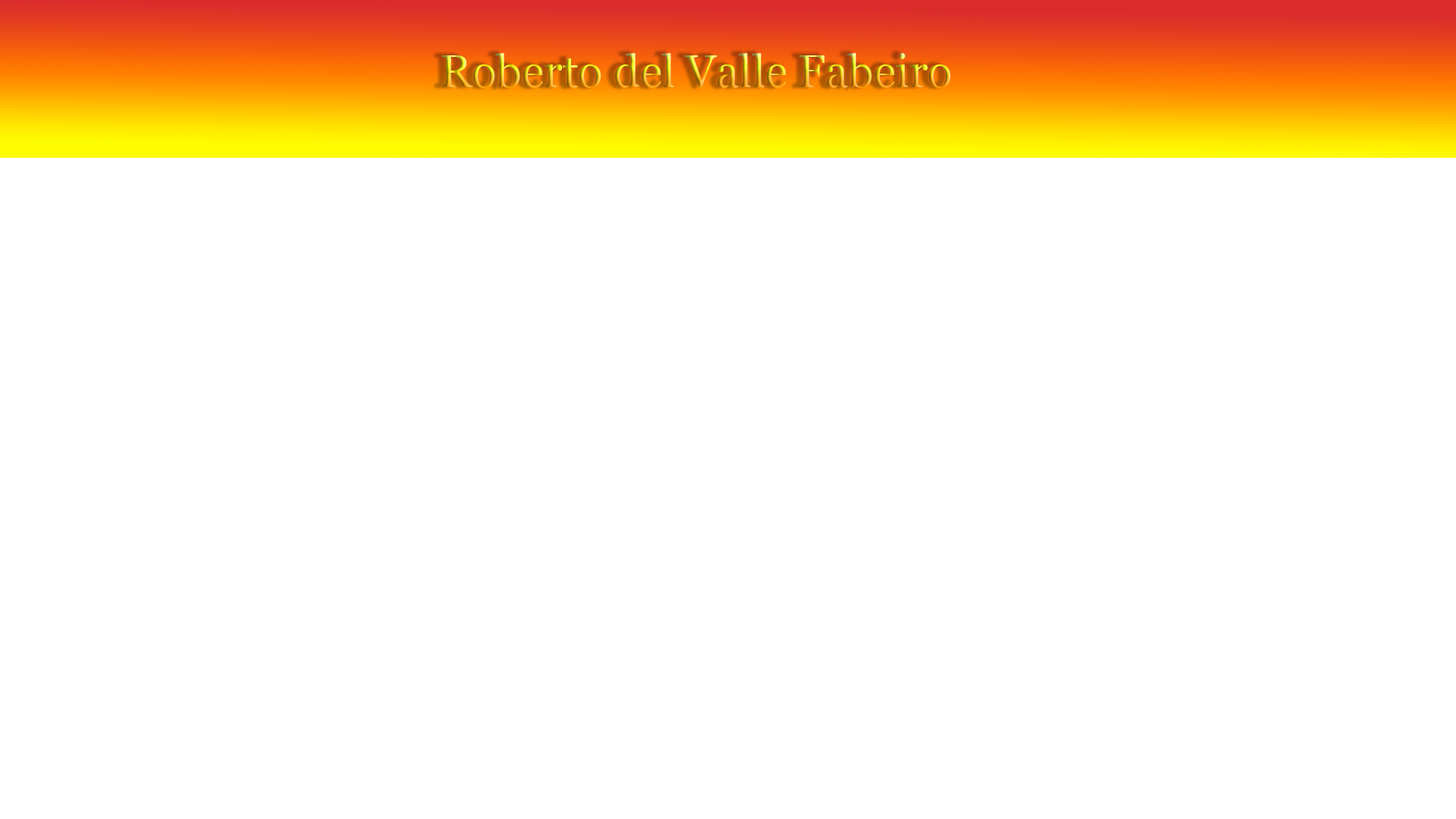
<style>
.page{position:relative;width:1456px;height:819px;background:#ffffff}
.page>*{position:absolute;margin:0}
.t1{font:45.5px "Georgia"}
</style>
<div class="page">
<p class="t1" style="left:441px;top:53px;width:510px;height:36px">Roberto del Valle Fabeiro</p>
</div>
